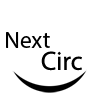
<style>
.page{position:relative;width:99px;height:99px;background:#ffffff}
.page>*{position:absolute;margin:0}
.t1{font:23.1px "MyriadPro-Regular";color:#000000}
.t2{font:26.4px "MyriadPro-Regular";color:#000000}
</style>
<div class="page">
<p class="t1" style="left:6px;top:32px;width:44px;height:16px">Next</p>
<p class="t2" style="left:41px;top:51px;width:41px;height:20px">Circ</p>
</div>
